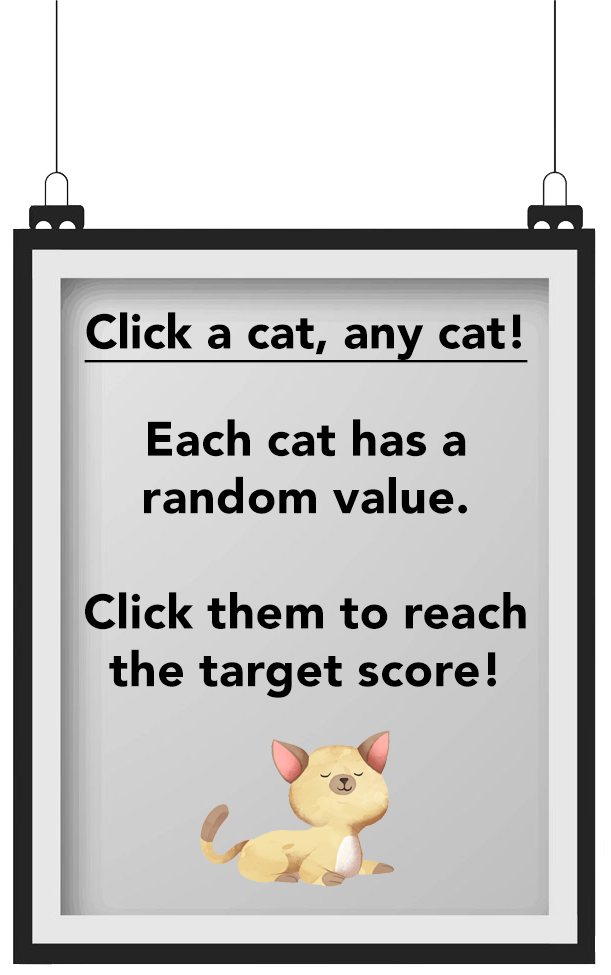
<style>
.page{position:relative;width:611px;height:975px;background:#ffffff}
.page>*{position:absolute;margin:0}
.t1{font:48px "Avenir-Black";color:#000000;text-decoration:underline}
.t2{font:48px "Avenir-Black";color:#000000}
</style>
<div class="page">
<p class="t1" style="left:84px;top:312px;width:444px;height:51px">Click a cat, any cat!</p>
<p class="t2" style="left:85px;top:419px;width:441px;height:279px;text-align:center">Each cat has a random value. <br><br>Click them to reach the target score!</p>
</div>
